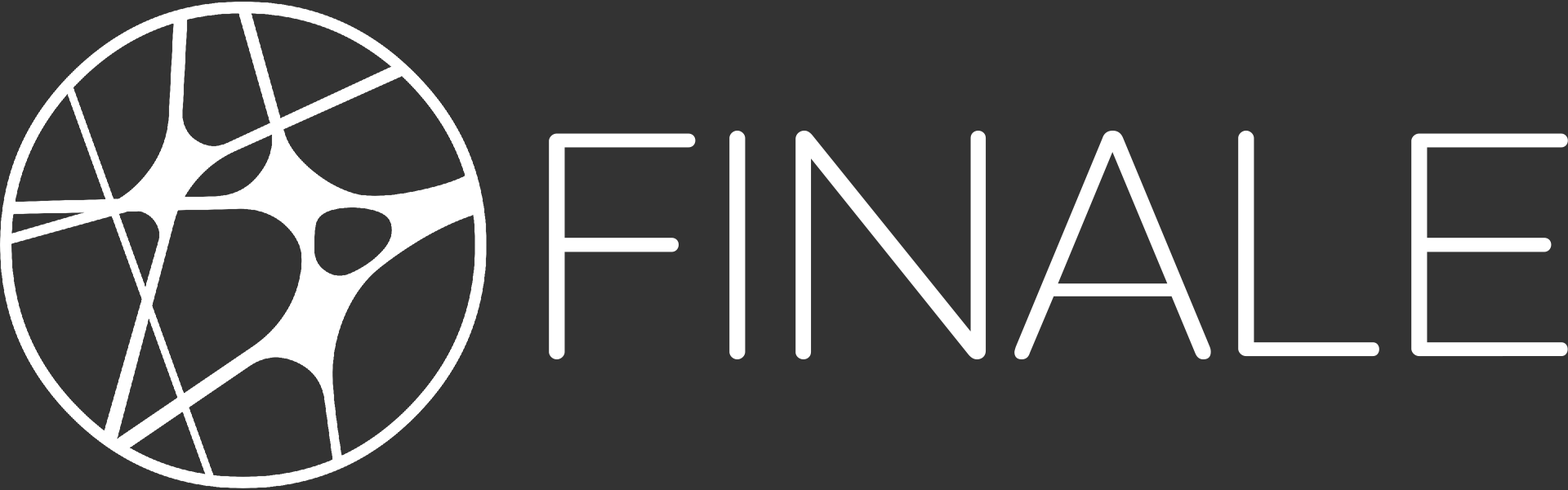
<style>
.page{position:relative;width:1568px;height:490px;background:#333333}
.page>*{position:absolute;margin:0}
.t1{font:326.7px "HouschkaRoundedAlt-Light";color:#ffffff}
</style>
<div class="page">
<p class="t1" style="left:549px;top:130px;width:1019px;height:230px">FINALE</p>
</div>
